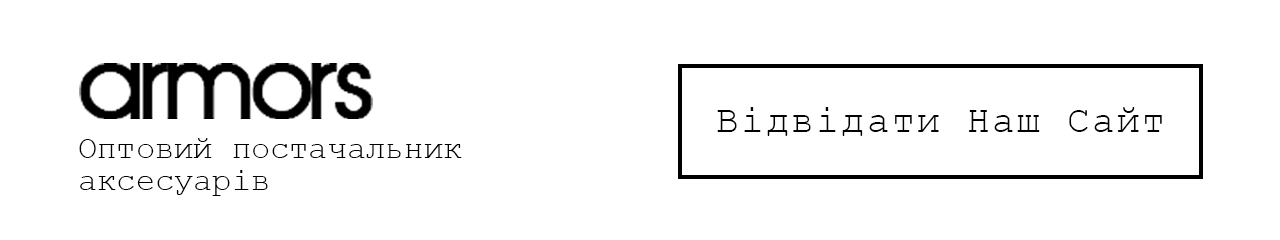
<style>
.page{position:relative;width:1280px;height:240px;background:#ffffff}
.page>*{position:absolute;margin:0}
.t1{font:38px "CourierNewPSMT";letter-spacing:0.06em;color:#000000}
.t2{font:32px/32px "CourierNewPSMT";color:#000000}
</style>
<div class="page">
<p class="t1" style="left:717px;top:107px;width:445px;height:29px">Відвідати Наш Сайт</p>
<p class="t2" style="left:79px;top:138px;width:383px;height:58px">Оптовий постачальник<br>аксесуарів</p>
</div>
